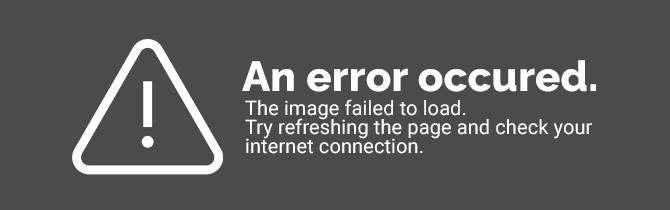
<style>
.page{position:relative;width:670px;height:210px;background:#4b4b4b}
.page>*{position:absolute;margin:0}
.t1{font:42px "Raleway-ExtraBold";letter-spacing:0.005em;color:#ffffff}
.t2{font:20px/19px "Roboto-Regular";letter-spacing:0.005em;color:#ffffff}
</style>
<div class="page">
<p class="t1" style="left:242px;top:60px;width:354px;height:32px">An error occured.</p>
<p class="t2" style="left:245px;top:99px;width:347px;height:55px">The image failed to load. <br>Try refreshing the page and check your<br>internet connection.</p>
</div>
